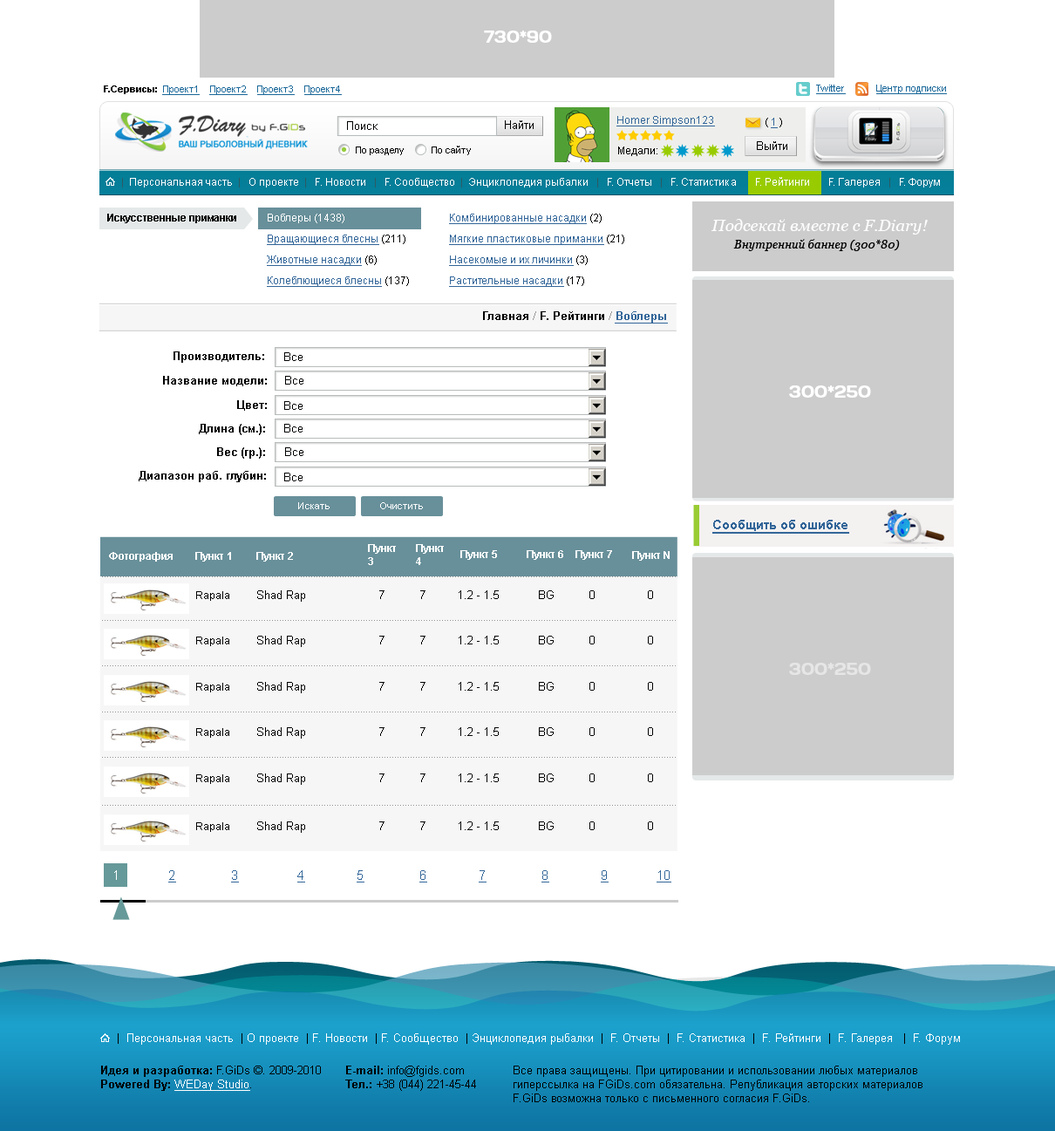
<style>
.page{position:relative;width:1055px;height:1131px;background:#ffffff}
.page>*{position:absolute;margin:0}
.t1{font:16.6px "Days";color:#ffffff}
.t2{font:9.6px "ArialMT";color:#1c699a;text-decoration:underline}
.t3{font:9.6px "Arial-BoldMT";color:#000000}
.t4{font:11.3px "ArialMT";color:#000000}
.t5{font:10.5px "ArialMT";color:#336699;text-decoration:underline}
.t6{font:10.5px "ArialMT";color:#000000}
.t7{font:9.6px "ArialMT";color:#000000}
.t8{font:10.5px "ArialMT";color:#ffffff}
.t9{font:10.5px "ArialMT";color:#2d5a63}
.t10{font:10.5px "Arial-BoldMT";color:#000000}
.t11{font:10.5px/20.9px "ArialMT";color:#336699;text-decoration:underline}
.t12{font:10.5px/20.9px "ArialMT";color:#ffffff}
.t13{font:10.5px/20.9px "ArialMT";color:#000000}
.t14{font:16.5px "Georgia-Italic";color:#fefefe}
.t15{font:11.7px/17.2px "Georgia-Italic";color:#000000}
.t16{font:11.3px "Arial-BoldMT";color:#000000}
.t17{font:11.3px "Arial-BoldMT";color:#999999}
.t18{font:11.3px "Arial-BoldMT";color:#336699;text-decoration:underline}
.t19{font:9.6px "ArialMT";color:#ffffff}
.t20{font:13.1px "Arial-BoldMT";color:#336699;text-decoration:underline}
.t21{font:10.5px/13.1px "Arial-BoldMT";color:#ffffff}
.t22{font:10.5px "Arial-BoldMT";color:#ffffff}
.t23{font:16.6px "Days";color:#e6e6e6}
.t24{font:13.1px "ArialMT";color:#336699;text-decoration:underline}
.t25{font:13.1px "ArialMT";color:#ffffff}
.t26{font:11.3px "ArialMT";color:#ffffff}
.t27{font:11.3px "ArialMT";color:#ffffff;text-decoration:underline}
</style>
<div class="page">
<p class="t1" style="left:484px;top:31px;width:68px;height:12px">730*90</p>
<p class="t2" style="left:104px;top:85px;width:238px;height:10px"><span class="t3">F.Сервисы:  </span>Проект1    Проект2    Проект3    Проект4</p>
<p class="t2" style="left:816px;top:85px;width:30px;height:9px">Twitter</p>
<p class="t2" style="left:876px;top:85px;width:71px;height:9px">Центр подписки</p>
<p class="t4" style="left:347px;top:121px;width:30px;height:9px">Поиск</p>
<p class="t4" style="left:505px;top:120px;width:28px;height:9px">Найти</p>
<p class="t5" style="left:616px;top:116px;width:99px;height:10px">Homer Simpson123</p>
<p class="t6" style="left:765px;top:118px;width:17px;height:10px">( <span class="t5">1</span> )</p>
<p class="t7" style="left:356px;top:146px;width:48px;height:9px">По разделу</p>
<p class="t7" style="left:431px;top:146px;width:40px;height:9px">По сайту</p>
<p class="t6" style="left:618px;top:146px;width:39px;height:10px">Медали:</p>
<p class="t4" style="left:757px;top:141px;width:30px;height:9px">Выйти</p>
<p class="t8" style="left:122px;top:177px;width:818px;height:10px"><span class="t9">|</span>  Персональная часть  <span class="t9">| </span>  О проекте  <span class="t9">|</span>   F. Новости   <span class="t9">|</span>   F. Сообщество <span class="t9"> |</span>  Энциклопедия рыбалки  <span class="t9"> |</span>   F. Отчеты   <span class="t9">|</span>   F. Статистика       F. Рейтинги       F. Галерея   <span class="t9">|</span>   F. Форум</p>
<p class="t10" style="left:107px;top:214px;width:129px;height:9px">Искусственные приманки</p>
<p class="t11" style="left:267px;top:214px;width:142px;height:73px"><span class="t12">Воблеры (1438)<br></span>Вращающиеся блесны<span class="t13"> (211)<br></span>Животные насадки<span class="t13"> (6)<br></span>Колеблющиеся блесны<span class="t13"> (137)</span></p>
<p class="t11" style="left:449px;top:214px;width:175px;height:73px">Комбинированные насадки<span class="t13"> (2)<br></span>Мягкие пластиковые приманки<span class="t13"> (21)<br></span>Насекомые и их личинки<span class="t13"> (3)<br></span>Растительные насадки<span class="t13"> (17)</span></p>
<p class="t14" style="left:711px;top:219px;width:216px;height:32px;text-align:center">Подсекай вместе с F.Diary!<br><span class="t15">Внутренний баннер (300*80)</span></p>
<p class="t16" style="left:483px;top:311px;width:185px;height:12px">Главная <span class="t17">/ </span>F. Рейтинги <span class="t17">/ </span><span class="t18">Воблеры</span></p>
<p class="t16" style="left:173px;top:351px;width:91px;height:12px">Производитель:</p>
<p class="t4" style="left:284px;top:352px;width:18px;height:9px">Все</p>
<p class="t16" style="left:163px;top:376px;width:104px;height:10px">Название модели:</p>
<p class="t4" style="left:285px;top:376px;width:18px;height:8px">Все</p>
<p class="t1" style="left:789px;top:385px;width:82px;height:12px">300*250</p>
<p class="t16" style="left:237px;top:400px;width:30px;height:11px">Цвет:</p>
<p class="t4" style="left:284px;top:401px;width:18px;height:9px">Все</p>
<p class="t16" style="left:199px;top:424px;width:66px;height:11px">Длина (см.):</p>
<p class="t4" style="left:284px;top:424px;width:18px;height:8px">Все</p>
<p class="t16" style="left:217px;top:447px;width:48px;height:12px">Вес (гр.):</p>
<p class="t4" style="left:285px;top:447px;width:18px;height:9px">Все</p>
<p class="t16" style="left:139px;top:471px;width:127px;height:11px">Диапазон раб. глубин:</p>
<p class="t4" style="left:284px;top:472px;width:18px;height:9px">Все</p>
<p class="t19" style="left:298px;top:502px;width:31px;height:7px">Искать</p>
<p class="t19" style="left:380px;top:502px;width:43px;height:7px">Очистить</p>
<p class="t20" style="left:712px;top:520px;width:137px;height:13px">Сообщить об ошибке</p>
<p class="t21" style="left:368px;top:544px;width:28px;height:21px">Пункт<br>3</p>
<p class="t21" style="left:416px;top:544px;width:28px;height:21px">Пункт<br>4</p>
<p class="t22" style="left:109px;top:552px;width:64px;height:9px">Фотография</p>
<p class="t22" style="left:195px;top:552px;width:36px;height:9px">Пункт 1</p>
<p class="t22" style="left:256px;top:552px;width:37px;height:9px">Пункт 2</p>
<p class="t22" style="left:460px;top:550px;width:37px;height:10px">Пункт 5</p>
<p class="t22" style="left:526px;top:550px;width:37px;height:10px">Пункт 6</p>
<p class="t22" style="left:575px;top:550px;width:37px;height:10px">Пункт 7</p>
<p class="t22" style="left:632px;top:551px;width:37px;height:9px">Пункт N</p>
<p class="t4" style="left:196px;top:590px;width:457px;height:11px"><span class="t6">Rapala          </span>Shad Rap                     7          7         1.2 - 1.5           BG          0               0</p>
<p class="t4" style="left:196px;top:635px;width:457px;height:12px"><span class="t6">Rapala          </span>Shad Rap                     7          7         1.2 - 1.5           BG          0               0</p>
<p class="t23" style="left:789px;top:662px;width:82px;height:13px">300*250</p>
<p class="t4" style="left:196px;top:682px;width:457px;height:11px"><span class="t6">Rapala          </span>Shad Rap                     7          7         1.2 - 1.5           BG          0               0</p>
<p class="t4" style="left:196px;top:727px;width:457px;height:11px"><span class="t6">Rapala          </span>Shad Rap                     7          7         1.2 - 1.5           BG          0               0</p>
<p class="t4" style="left:196px;top:773px;width:457px;height:12px"><span class="t6">Rapala          </span>Shad Rap                     7          7         1.2 - 1.5           BG          0               0</p>
<p class="t4" style="left:196px;top:821px;width:457px;height:11px"><span class="t6">Rapala          </span>Shad Rap                     7          7         1.2 - 1.5           BG          0               0</p>
<p class="t24" style="left:114px;top:870px;width:557px;height:12px"><span class="t25">1              </span>2                3                 4               5                6               7                8               9              10</p>
<p class="t26" style="left:118px;top:1033px;width:842px;height:11px"><span class="t4">|</span>  Персональная часть <span class="t4"> |</span> О проекте  <span class="t4">|</span> F. Новости  <span class="t4">|</span> F. Сообщество  <span class="t4">|</span> Энциклопедия рыбалки  <span class="t4">|</span>  F. Отчеты  <span class="t4">|</span>  F. Статистика  <span class="t4">|</span>  F. Рейтинги  <span class="t4">|</span>  F. Галерея   <span class="t4">|</span>  F. Форум</p>
<p class="t4" style="left:101px;top:1065px;width:220px;height:25px"><span class="t16">Идея и разработка:</span> F.GiDs ©. 2009-2010<br><span class="t16">Powered By: </span><span class="t27">WEDay Studio</span>.</p>
<p class="t4" style="left:345px;top:1065px;width:131px;height:25px"><span class="t16">E-mail: </span>info@fgids.com<br><span class="t16">Тел.:</span> +38 (044) 221-45-44</p>
<p class="t4" style="left:513px;top:1065px;width:409px;height:37px">Все права защищены. При цитировании и использовании любых материалов гиперссылка на FGiDs.com обязательна. Републикация авторских материалов F.GiDs возможна только с письменного согласия F.GiDs.</p>
</div>
